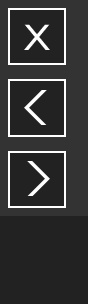
<style>
.page{position:relative;width:88px;height:304px;background:#222222}
.page>*{position:absolute;margin:0}
.t1{font:37px "GillSans";color:#ffffff}
</style>
<div class="page">
<p class="t1" style="left:24px;top:24px;width:26px;height:26px">X</p>
</div>
